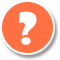
<style>
.page{position:relative;width:60px;height:60px;background:#ff7043}
.page>*{position:absolute;margin:0}
.t1{font:41.7px "ShowcardGothic-Reg";color:#ffffff}
</style>
<div class="page">
<p class="t1" style="left:19px;top:11px;width:18px;height:34px">?</p>
</div>
